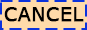
<style>
.page{position:relative;width:87px;height:30px;background:#ffdbaa}
.page>*{position:absolute;margin:0}
.t1{font:19px "Verdana";color:#000000;font-weight:bold}
</style>
<div class="page">
<p class="t1" style="left:4px;top:7px;width:80px;height:15px">CANCEL</p>
</div>
